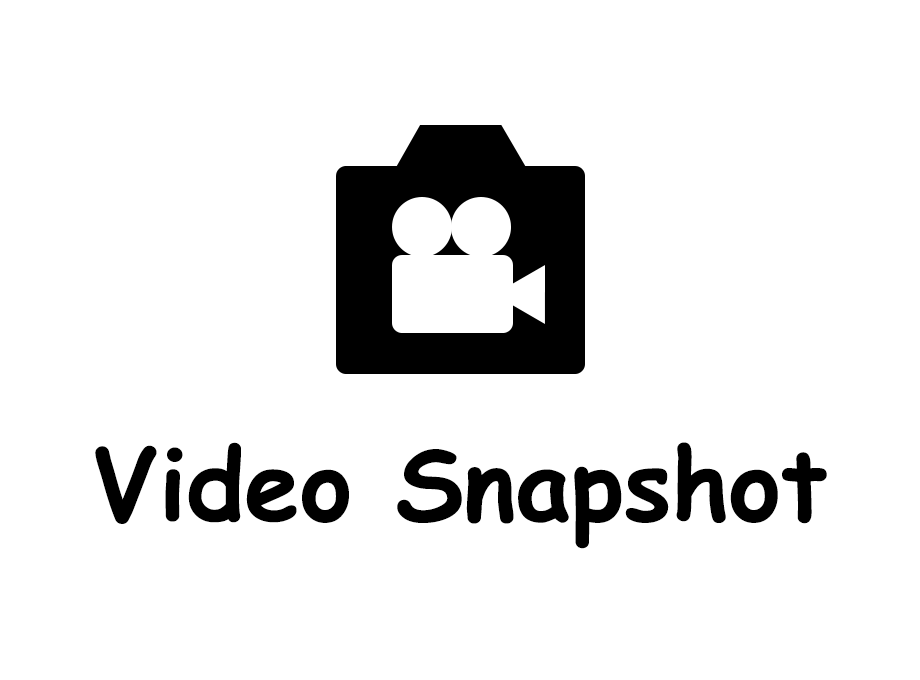
<style>
.page{position:relative;width:920px;height:680px;background:#ffffff}
.page>*{position:absolute;margin:0}
.t1{font:99px "ComicSansMS-Bold";color:#000000}
</style>
<div class="page">
<p class="t1" style="left:95px;top:442px;width:732px;height:107px">Video Snapshot</p>
</div>
